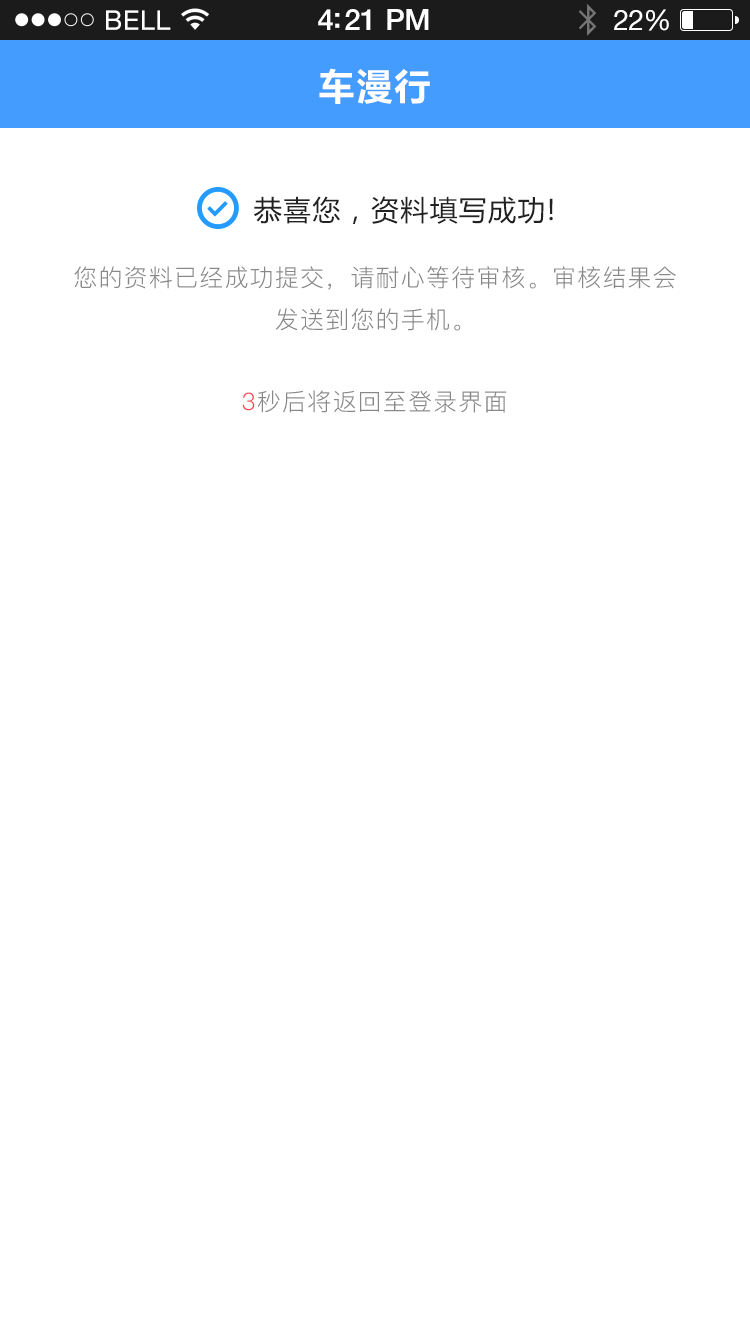
<style>
.page{position:relative;width:750px;height:1334px;background:#ffffff}
.page>*{position:absolute;margin:0}
.t1{font:36px "MicrosoftYaHei-Bold";letter-spacing:0.05em;color:#ffffff}
.t2{font:28px "MicrosoftYaHei";letter-spacing:0.05em;color:#222222}
.t3{font:24px "PingFang-SC-Regular";letter-spacing:0.05em;color:#888888}
.t4{font:24px "PingFang-SC-Regular";letter-spacing:0.05em;color:#ff4751}
</style>
<div class="page">
<p class="t1" style="left:319px;top:68px;width:111px;height:36px">车漫行</p>
<p class="t2" style="left:254px;top:196px;width:299px;height:28px">恭喜您，资料填写成功!</p>
<p class="t3" style="left:74px;top:266px;width:602px;height:65px;text-align:center">您的资料已经成功提交，请耐心等待审核。审核结果会<br>发送到您的手机。</p>
<p class="t3" style="left:242px;top:390px;width:265px;height:23px"><span class="t4">3</span>秒后将返回至登录界面</p>
</div>
